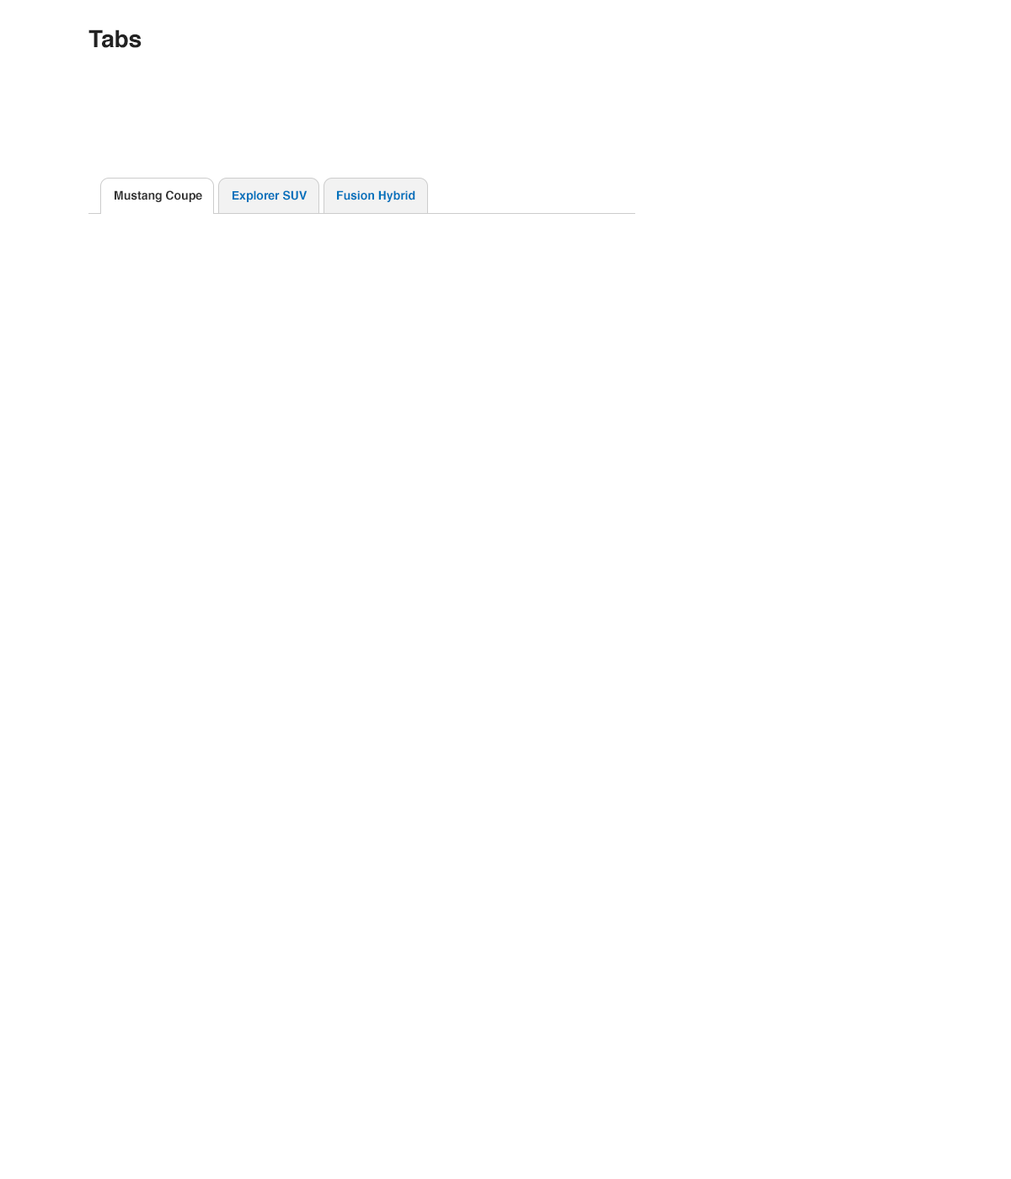
<style>
.page{position:relative;width:1011px;height:1179px;background:#ffffff}
.page>*{position:absolute;margin:0}
.t1{font:23.6px "Helvetica-Bold";color:#222222}
.t2{font:11.8px "Helvetica-Bold";color:#333333}
.t3{font:11.8px "Helvetica-Bold";color:#0072bc}
</style>
<div class="page">
<p class="t1" style="left:88px;top:29px;width:54px;height:19px">Tabs</p>
<p class="t2" style="left:115px;top:190px;width:87px;height:12px">Mustang Coupe</p>
<p class="t3" style="left:233px;top:190px;width:75px;height:12px">Explorer SUV</p>
<p class="t3" style="left:337px;top:190px;width:78px;height:12px">Fusion Hybrid</p>
</div>
